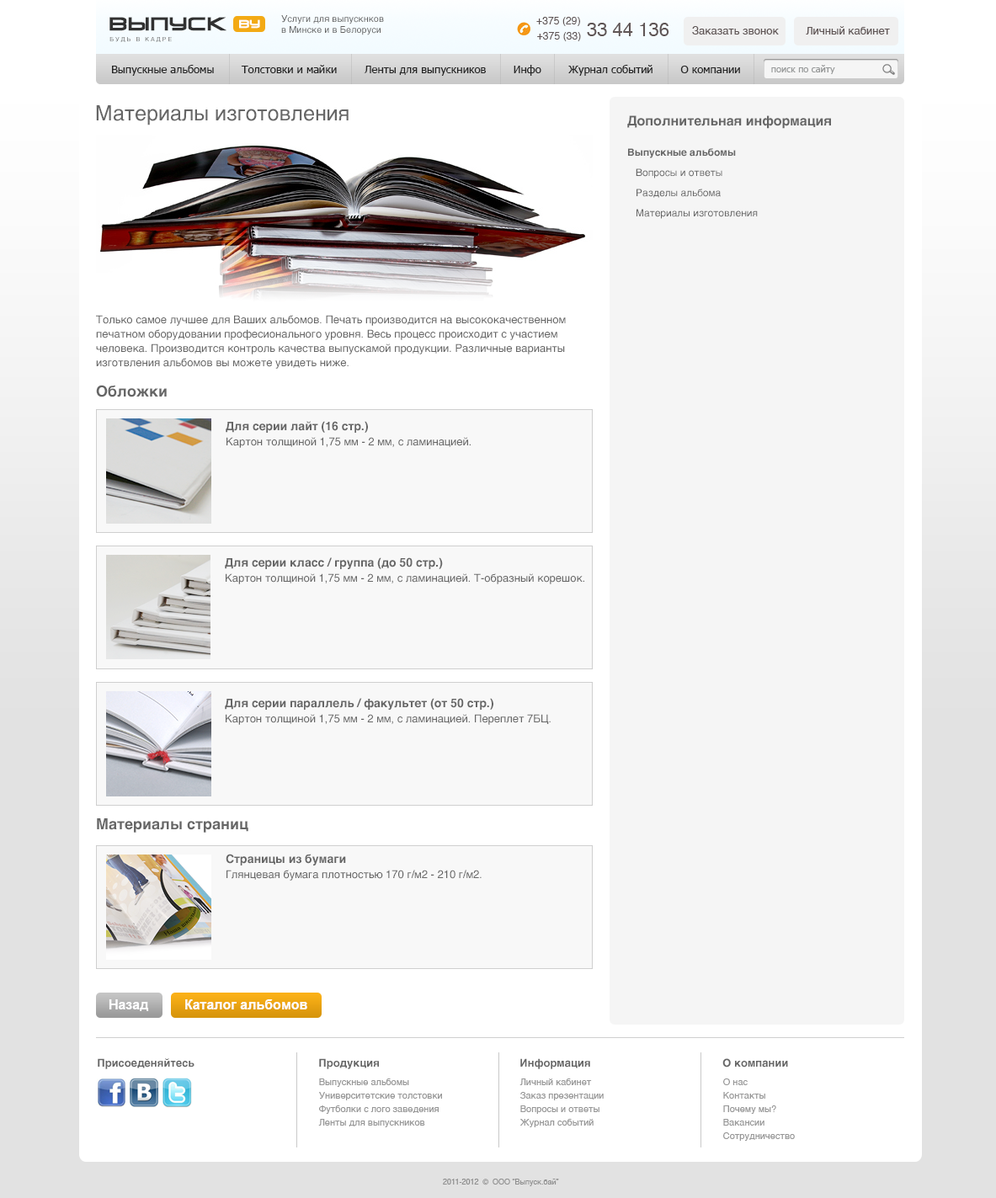
<style>
.page{position:relative;width:996px;height:1198px;background:#ffffff}
.page>*{position:absolute;margin:0}
.t1{font:17.7px "VenusRisingCyrillic";letter-spacing:0.01em;color:#313131;font-weight:bold}
.t2{font:9.3px "Helvetica";color:#616161}
.t3{font:10.1px "Helvetica";letter-spacing:0.01em;color:#5f5555}
.t4{font:10.6px "VenusRisingCyrillic";letter-spacing:0.01em;color:#ffffff;font-weight:bold}
.t5{font:18.5px "Helvetica";color:#5f5555}
.t6{font:10.9px "Helvetica";color:#5f5555}
.t7{font:5.9px "Helvetica";letter-spacing:0.3em;color:#6d6d6d;text-transform:uppercase}
.t8{font:10.9px "Tahoma";color:#242424}
.t9{font:9.3px "Tahoma";color:#979999}
.t10{font:21px "Helvetica";color:#666666}
.t11{font:10.1px/20.2px "Helvetica";color:#666666}
.t12{font:13.5px "Helvetica-Bold";color:#666666}
.t13{font:10.1px/30.3px "Helvetica-Bold";color:#666666}
.t14{font:10.9px/14.3px "Helvetica";color:#666666}
.t15{font:10.9px "Helvetica";color:#666666}
.t16{font:15.1px "Helvetica-Bold";color:#666666}
.t17{font:10.9px/15.1px "Helvetica";color:#666666}
.t18{font:11.8px/15.1px "Helvetica-Bold";color:#666666}
.t19{font:11.8px "Helvetica-Bold";color:#666666}
.t20{font:13.5px "Arial-BoldMT";color:#fdfdfe}
.t21{font:10.9px "Helvetica-Bold";color:#666666}
.t22{font:9.3px/13.5px "Helvetica";color:#979797}
.t23{font:7.6px "Helvetica";color:#909090}
</style>
<div class="page">
<p class="t1" style="left:109px;top:17px;width:117px;height:14px">ВЫпуск</p>
<p class="t2" style="left:281px;top:15px;width:103px;height:20px">Услуги для выпускнков<br>в Минске и в Белоруси</p>
<p class="t3" style="left:536px;top:17px;width:44px;height:9px">+375 (29)</p>
<p class="t4" style="left:239px;top:19px;width:21px;height:10px">by</p>
<p class="t5" style="left:587px;top:23px;width:82px;height:13px">33 44 136</p>
<p class="t6" style="left:692px;top:26px;width:198px;height:9px">Заказать звонок         Личный кабинет</p>
<p class="t7" style="left:109px;top:37px;width:63px;height:5px">будь в кадре</p>
<p class="t3" style="left:537px;top:32px;width:44px;height:9px">+375 (33)</p>
<p class="t8" style="left:112px;top:65px;width:628px;height:11px">Выпускные альбомы        Толстовки и майки        Ленты для выпускников        Инфо        Журнал событий        О компании</p>
<p class="t9" style="left:771px;top:65px;width:64px;height:9px">поиск по сайту</p>
<p class="t10" style="left:96px;top:105px;width:252px;height:20px">Материалы изготовления</p>
<p class="t11" style="left:627px;top:115px;width:204px;height:104px"><span class="t12">Дополнительная информация<br></span><span class="t13">Выпускные альбомы<br></span>   Вопросы и ответы<br>   Разделы альбома<br>   Материалы изготовления</p>
<p class="t14" style="left:96px;top:315px;width:470px;height:54px"><span class="t15">Только самое лучшее для Ваших альбомов. Печать производится на высококачественном </span>печатном оборудовании професионального уровня. Весь процесс происходит с участием человека. Производится контроль качества выпускамой продукции. Различные варианты изготвления альбомов вы можете увидеть ниже.</p>
<p class="t16" style="left:96px;top:385px;width:71px;height:12px">Обложки</p>
<p class="t17" style="left:226px;top:421px;width:244px;height:27px"><span class="t18">Для серии лайт (16 стр.)<br></span>Картон толщиной 1,75 мм - 2 мм, с ламинацией.</p>
<p class="t17" style="left:225px;top:557px;width:359px;height:27px"><span class="t18">Для серии класс / группа (до 50 стр.)<br></span>Картон толщиной 1,75 мм - 2 мм, с ламинацией. Т-образный корешок.</p>
<p class="t17" style="left:225px;top:698px;width:325px;height:27px"><span class="t18">Для серии параллель / факультет (от 50 стр.)<br></span>Картон толщиной 1,75 мм - 2 мм, с ламинацией. Переплет 7БЦ.</p>
<p class="t16" style="left:97px;top:818px;width:151px;height:14px">Материалы страниц</p>
<p class="t17" style="left:226px;top:853px;width:255px;height:27px"><span class="t19">Страницы из бумаги<br></span>Глянцевая бумага плотностью 170 г/м2 - 210 г/м2.</p>
<p class="t20" style="left:109px;top:999px;width:40px;height:12px">Назад</p>
<p class="t20" style="left:185px;top:999px;width:122px;height:10px">Каталог альбомов</p>
<p class="t21" style="left:98px;top:1058px;width:96px;height:11px">Присоеденяйтесь</p>
<p class="t21" style="left:319px;top:1058px;width:60px;height:11px">Продукция</p>
<p class="t21" style="left:520px;top:1058px;width:70px;height:11px">Информация</p>
<p class="t21" style="left:722px;top:1058px;width:66px;height:9px">О компании</p>
<p class="t22" style="left:318px;top:1078px;width:124px;height:49px">Выпускные альбомы<br>Университетские толстовки<br>Футболки с лого заведения<br>Ленты для выпускников</p>
<p class="t22" style="left:519px;top:1078px;width:84px;height:49px">Личный кабинет<br>Заказ презентации<br>Вопросы и ответы<br>Журнал событий</p>
<p class="t22" style="left:723px;top:1078px;width:72px;height:62px">О нас<br>Контакты<br>Почему мы? <br>Вакансии<br>Сотрудничество</p>
<p class="t23" style="left:443px;top:1178px;width:116px;height:8px">2011-2012  ©  ООО “Выпуск.бай”</p>
</div>
